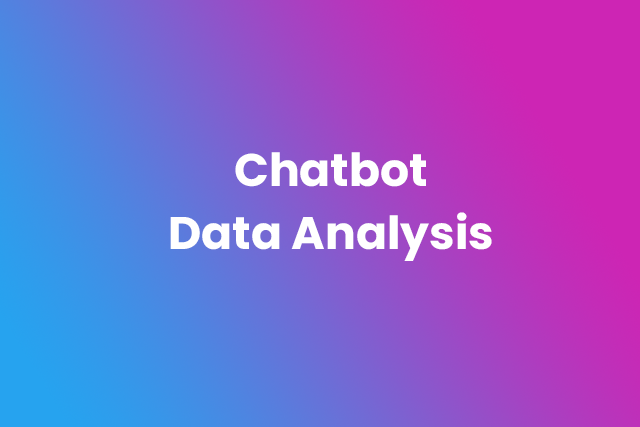
<style>
.page{position:relative;width:640px;height:427px}
.page>*{position:absolute;margin:0}
.t1{font:45.7px/63.5px "Poppins-Bold";color:#ffffff}
</style>
<div class="page">
<p class="t1" style="left:170px;top:152px;width:322px;height:109px;text-align:center">Chatbot<br>Data Analysis</p>
</div>
